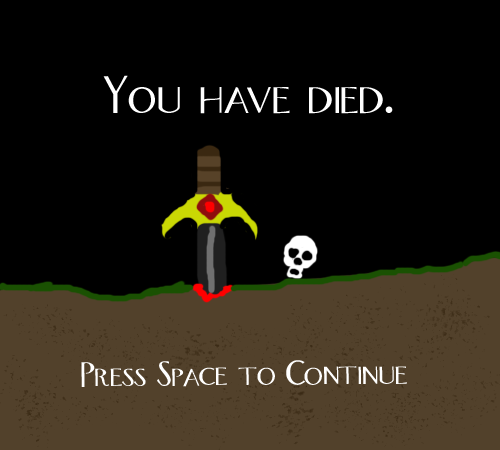
<style>
.page{position:relative;width:500px;height:450px;background:#000000}
.page>*{position:absolute;margin:0}
.t1{font:49.8px "Orlando";color:#ffffff}
.t2{font:33.2px "Orlando";color:#ffffff}
</style>
<div class="page">
<p class="t1" style="left:103px;top:75px;width:290px;height:39px">You have died.</p>
<p class="t2" style="left:81px;top:360px;width:326px;height:27px;rotate:-1deg">Press Space to Continue</p>
</div>
